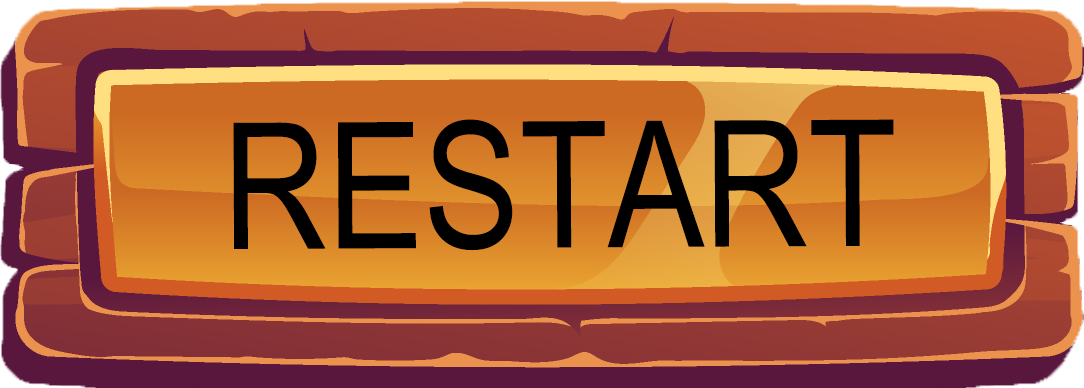
<style>
.page{position:relative;width:1084px;height:388px}
.page>*{position:absolute;margin:0}
.t1{font:176px "ArialNarrow";color:#000000}
</style>
<div class="page">
<p class="t1" style="left:233px;top:119px;width:661px;height:132px">RESTART</p>
</div>
